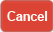
<style>
.page{position:relative;width:53px;height:32px;background:#db4435}
.page>*{position:absolute;margin:0}
.t1{font:12.6px "Arial-BoldMT";color:#fffaf6}
</style>
<div class="page">
<p class="t1" style="left:7px;top:11px;width:41px;height:10px">Cancel</p>
</div>
